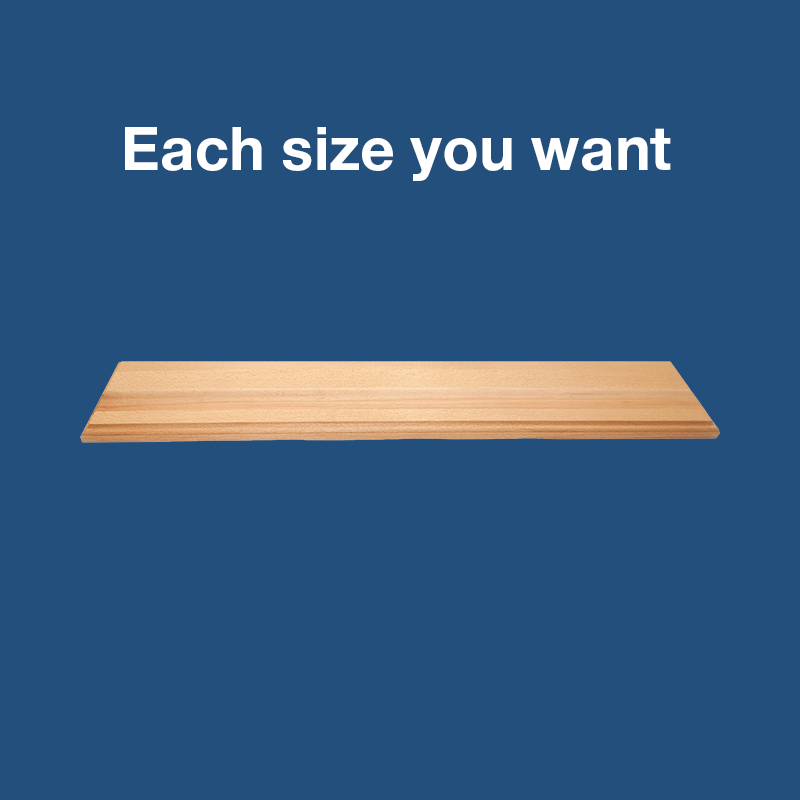
<style>
.page{position:relative;width:800px;height:800px;background:#224f7b}
.page>*{position:absolute;margin:0}
.t1{font:60px "HelveticaNeueCyr-Bold";color:#ffffff}
</style>
<div class="page">
<p class="t1" style="left:125px;top:127px;width:546px;height:54px">Each size you want</p>
</div>
